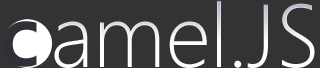
<style>
.page{position:relative;width:320px;height:68px;background:#333333}
.page>*{position:absolute;margin:0}
.t1{font:88.7px "SegoeUI-Light";color:#ffffff}
.t2{font:63.1px "SegoeUI-Bold";color:#303037}
</style>
<div class="page">
<p class="t1" style="left:54px;top:1px;width:261px;height:67px">amel.JS</p>
<p class="t2" style="left:2px;top:21px;width:35px;height:46px">C</p>
</div>
